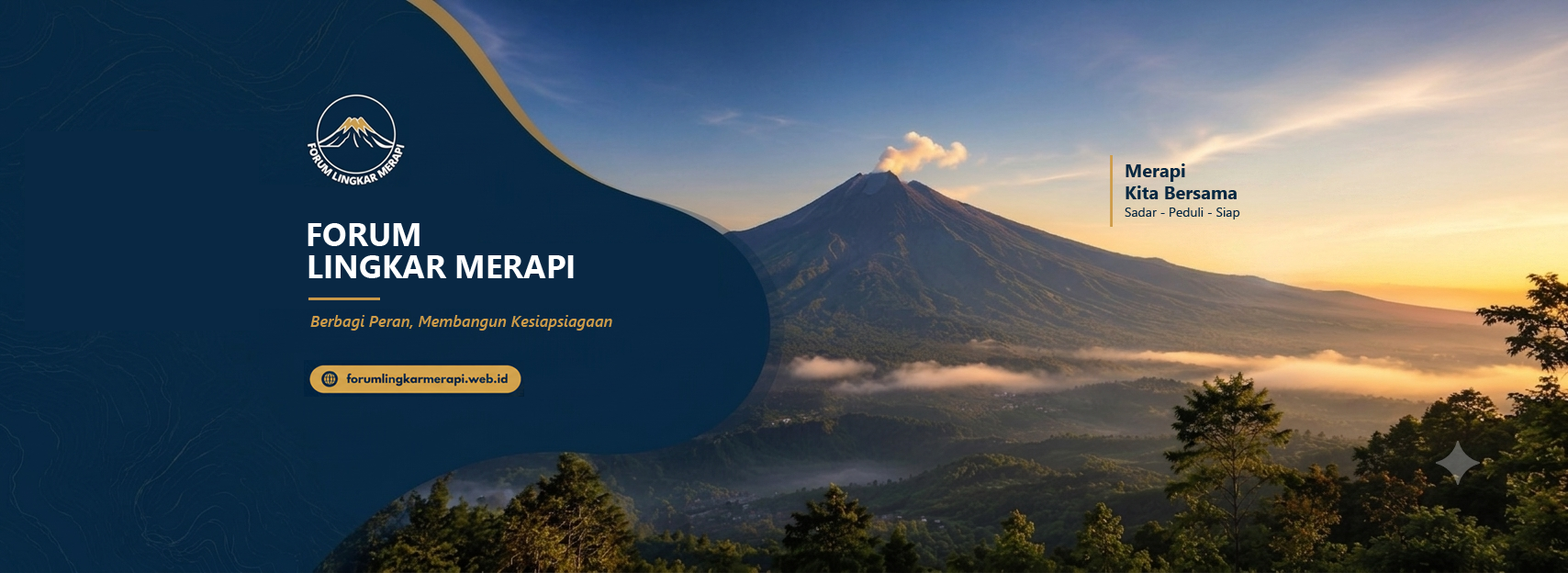
<style>
.page{position:relative;width:1568px;height:573px}
.page>*{position:absolute;margin:0}
.t1{font:18.4px "SegoeUI-Bold";color:#072841}
.t2{font:12.9px "SegoeUI";color:#072841}
.t3{font:32.1px "SegoeUI-Bold";color:#ffffff}
.t4{font:15.6px "SegoeUI-SemiboldItalic";color:#ce9c49}
</style>
<div class="page">
<p class="t1" style="left:1126px;top:163px;width:111px;height:36px">Merapi<br>Kita Bersama</p>
<p class="t2" style="left:1125px;top:207px;width:115px;height:12px">Sadar - Peduli - Siap</p>
<p class="t3" style="left:308px;top:223px;width:112px;height:23px">FORUM</p>
<p class="t3" style="left:308px;top:255px;width:266px;height:23px">LINGKAR MERAPI</p>
<p class="t4" style="left:310px;top:315px;width:302px;height:15px">Berbagi Peran, Membangun Kesiapsiagaan</p>
</div>
